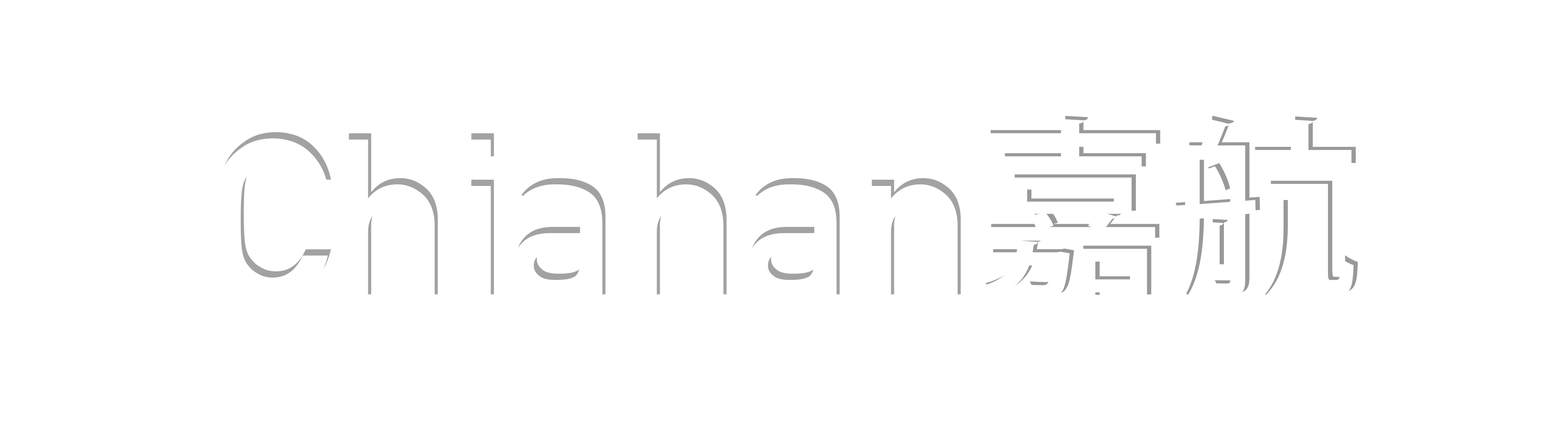
<style>
.page{position:relative;width:1568px;height:421px;background:#ffffff}
.page>*{position:absolute;margin:0}
.t1{font:191px "KozGoPr6N-Medium";color:#ffffff}
.t2{font:226px "DINAlternate-Bold";color:#ffffff}
</style>
<div class="page">
<p class="t1" style="left:985px;top:115px;width:373px;height:180px">嘉航</p>
<p class="t2" style="left:220px;top:132px;width:741px;height:163px">Chiahan</p>
</div>
